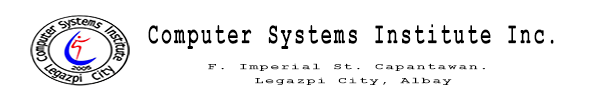
<style>
.page{position:relative;width:600px;height:100px;background:#ffffff}
.page>*{position:absolute;margin:0}
.t1{font:31.1px "CourierNewPS-BoldMT";letter-spacing:0.13em;color:#000000;scale:0.59 1}
.t2{font:8.9px/13.9px "CourierNewPS-BoldMT";letter-spacing:0.13em;color:#000000;scale:1.6 1}
</style>
<div class="page">
<p class="t1" style="left:148px;top:24px;width:406px;height:25px">Computer Systems Institute Inc.</p>
<p class="t2" style="left:208px;top:63px;width:277px;height:22px;text-align:center">F. Imperial St. Capantawan. <br>Legazpi City, Albay</p>
</div>
